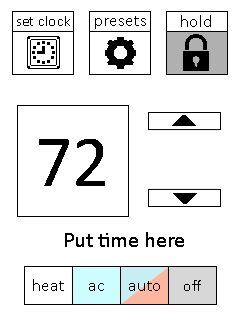
<style>
.page{position:relative;width:240px;height:320px;background:#ffffff}
.page>*{position:absolute;margin:0}
.t1{font:15.2px "Calibri";color:#000000}
.t2{font:17.2px "Calibri";color:#000000}
.t3{font:74px "Calibri";color:#000000}
.t4{font:21.9px "Calibri";color:#000000}
.t5{font:16.2px "Calibri";color:#000000}
</style>
<div class="page">
<p class="t1" style="left:17px;top:16px;width:53px;height:10px">set clock</p>
<p class="t2" style="left:95px;top:16px;width:51px;height:13px">presets</p>
<p class="t2" style="left:181px;top:15px;width:30px;height:12px">hold</p>
<p class="t2" style="left:181px;top:15px;width:30px;height:12px">hold</p>
<p class="t3" style="left:39px;top:139px;width:66px;height:47px">72</p>
<p class="t4" style="left:65px;top:232px;width:119px;height:15px">Put time here</p>
<p class="t2" style="left:33px;top:279px;width:31px;height:12px">heat</p>
<p class="t2" style="left:33px;top:279px;width:31px;height:12px">heat</p>
<p class="t2" style="left:33px;top:279px;width:31px;height:12px">heat</p>
<p class="t2" style="left:129px;top:281px;width:31px;height:10px">auto</p>
<p class="t2" style="left:129px;top:281px;width:31px;height:10px">auto</p>
<p class="t2" style="left:129px;top:281px;width:31px;height:10px">auto</p>
<p class="t5" style="left:184px;top:280px;width:17px;height:11px">off</p>
<p class="t5" style="left:184px;top:280px;width:17px;height:11px">off</p>
<p class="t5" style="left:184px;top:280px;width:17px;height:11px">off</p>
<p class="t2" style="left:89px;top:283px;width:15px;height:8px">ac</p>
<p class="t2" style="left:89px;top:283px;width:15px;height:8px">ac</p>
<p class="t2" style="left:89px;top:283px;width:15px;height:8px">ac</p>
</div>
